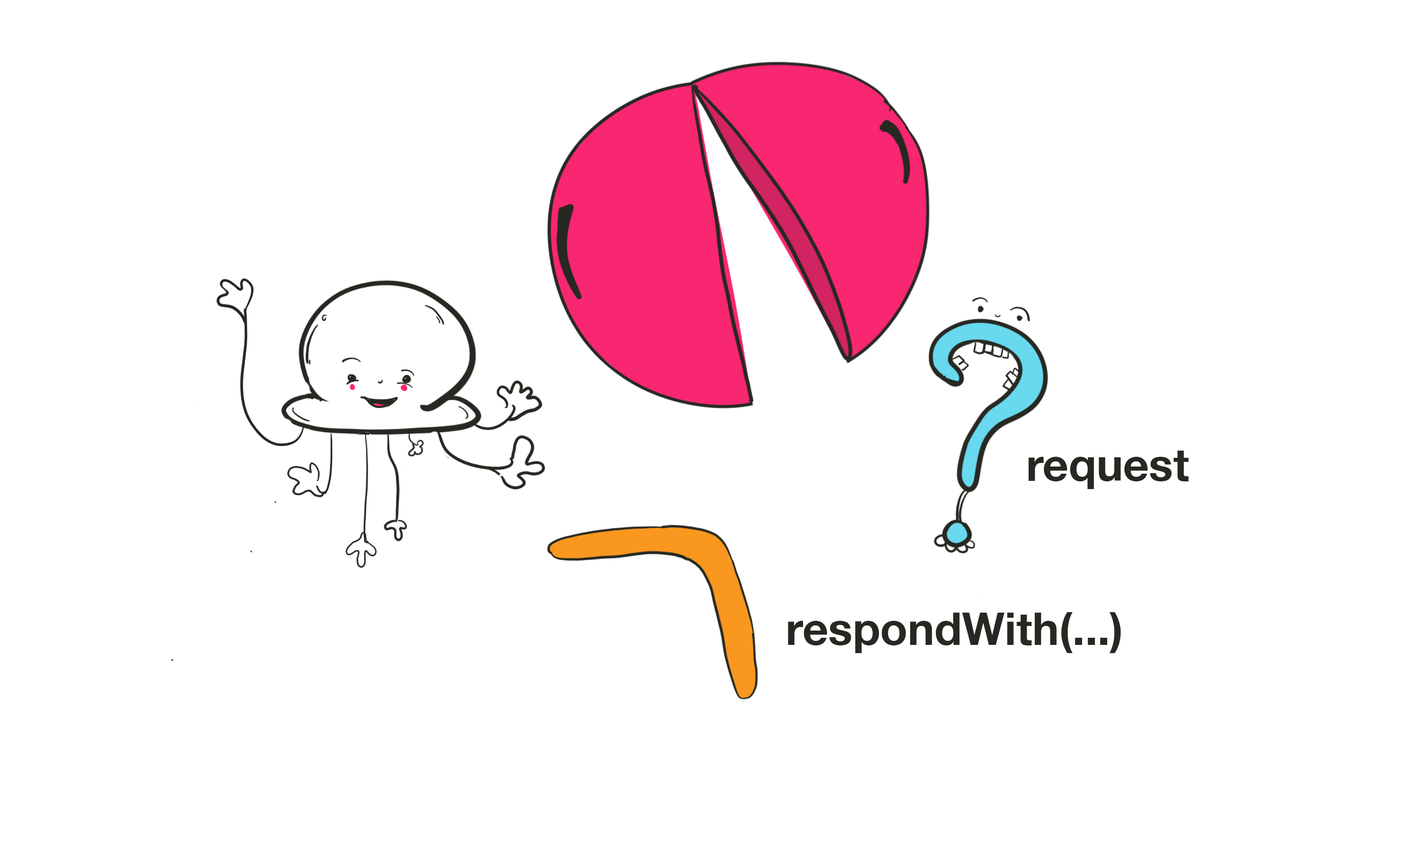
<style>
.page{position:relative;width:1401px;height:851px;background:#ffffff}
.page>*{position:absolute;margin:0}
.t1{font:45.1px "HelveticaNeue-Bold";color:#272822}
</style>
<div class="page">
<p class="t1" style="left:1028px;top:451px;width:161px;height:38px">request</p>
<p class="t1" style="left:788px;top:612px;width:333px;height:41px">respondWith(...)</p>
</div>
